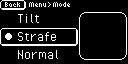
<style>
.page{position:relative;width:128px;height:64px;background:#000000}
.page>*{position:absolute;margin:0}
.t1{font:8px "6pxNormal";color:#ffffff}
.t2{font:16px "PixelOperator";color:#ffffff}
</style>
<div class="page">
<p class="t1" style="left:5px;top:2px;width:15px;height:5px">Back</p>
<p class="t1" style="left:29px;top:2px;width:17px;height:5px">Menu</p>
<p class="t1" style="left:48px;top:2px;width:3px;height:5px">&gt;</p>
<p class="t1" style="left:53px;top:2px;width:17px;height:5px">Mode</p>
<p class="t2" style="left:18px;top:14px;width:21px;height:9px">Tilt</p>
<p class="t2" style="left:18px;top:32px;width:38px;height:9px">Strafe</p>
<p class="t2" style="left:18px;top:50px;width:40px;height:9px">Normal</p>
</div>
